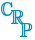
<style>
.page{position:relative;width:35px;height:40px;background:#ffffff}
.page>*{position:absolute;margin:0}
.t1{font:18px "MMaFermat-Bold";color:#0091d3}
</style>
<div class="page">
<p class="t1" style="left:1px;top:2px;width:12px;height:14px">C</p>
<p class="t1" style="left:11px;top:10px;width:14px;height:14px">R</p>
<p class="t1" style="left:20px;top:23px;width:13px;height:14px">P</p>
</div>
